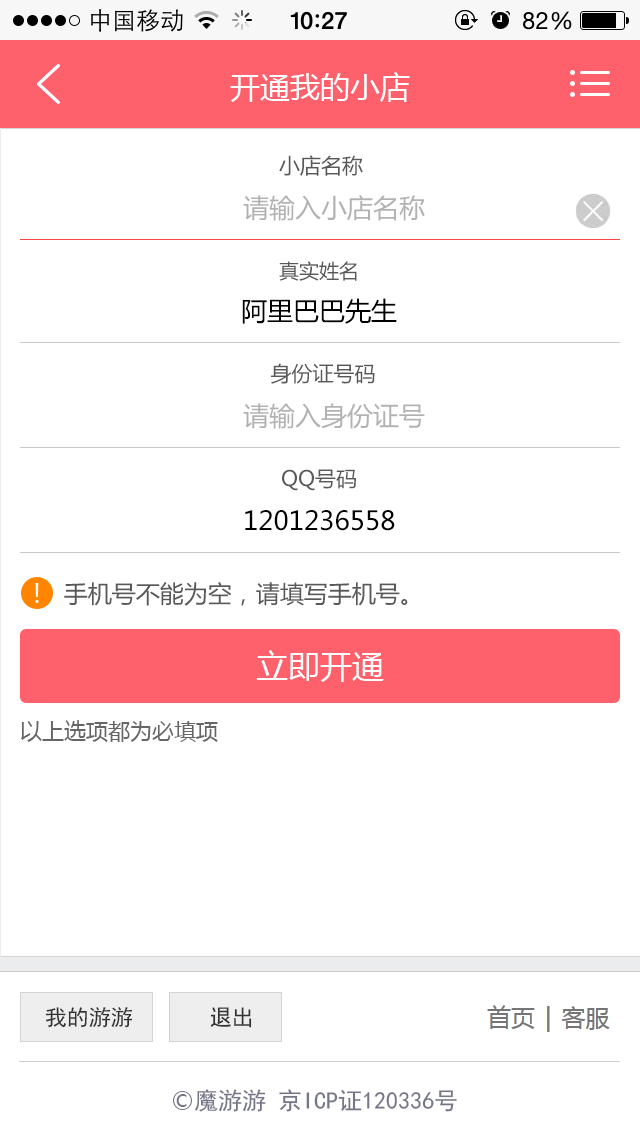
<style>
.page{position:relative;width:640px;height:1136px;background:#ffffff}
.page>*{position:absolute;margin:0}
.t1{font:30px "MicrosoftYaHei";color:#ffffff}
.t2{font:21px "MicrosoftYaHei";color:#585858}
.t3{font:26px "MicrosoftYaHei";color:#b2b2b2}
.t4{font:20px "MicrosoftYaHei";color:#585858}
.t5{font:26px "MicrosoftYaHei";color:#000000}
.t6{font:24px "MicrosoftYaHei";color:#585858}
.t7{font:32px "MicrosoftYaHei";color:#ffffff}
.t8{font:22px "MicrosoftYaHei";color:#666666}
.t9{font:22px "SimHei";color:#333333}
.t10{font:24px "SimHei";color:#757588}
.t11{font:24px "MicrosoftYaHei";color:#757588}
</style>
<div class="page">
<p class="t1" style="left:230px;top:72px;width:180px;height:30px">开通我的小店</p>
<p class="t2" style="left:279px;top:155px;width:84px;height:21px">小店名称</p>
<p class="t3" style="left:243px;top:195px;width:182px;height:26px">请输入小店名称</p>
<p class="t4" style="left:279px;top:261px;width:78px;height:20px">真实姓名</p>
<p class="t5" style="left:242px;top:298px;width:155px;height:26px">阿里巴巴先生</p>
<p class="t2" style="left:271px;top:363px;width:104px;height:21px">身份证号码</p>
<p class="t3" style="left:243px;top:403px;width:182px;height:26px">请输入身份证号</p>
<p class="t2" style="left:282px;top:469px;width:74px;height:22px">QQ号码</p>
<p class="t5" style="left:245px;top:510px;width:150px;height:21px">1201236558</p>
<p class="t6" style="left:64px;top:582px;width:344px;height:24px">手机号不能为空，请填写手机号。</p>
<p class="t7" style="left:256px;top:650px;width:128px;height:32px">立即开通</p>
<p class="t8" style="left:21px;top:720px;width:197px;height:22px">以上选项都为必填项</p>
<p class="t9" style="left:45px;top:1007px;width:207px;height:21px">我的游游       退出</p>
<p class="t10" style="left:173px;top:1089px;width:284px;height:23px"><span class="t11">©</span>魔游游 京ICP证120336号</p>
</div>
